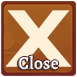
<style>
.page{position:relative;width:77px;height:77px;background:#fdf1da}
.page>*{position:absolute;margin:0}
.t1{font:18px "AlegreyaRoman-Bold"}
</style>
<div class="page">
<p class="t1" style="left:18px;top:55px;width:41px;height:15px">Close</p>
</div>
